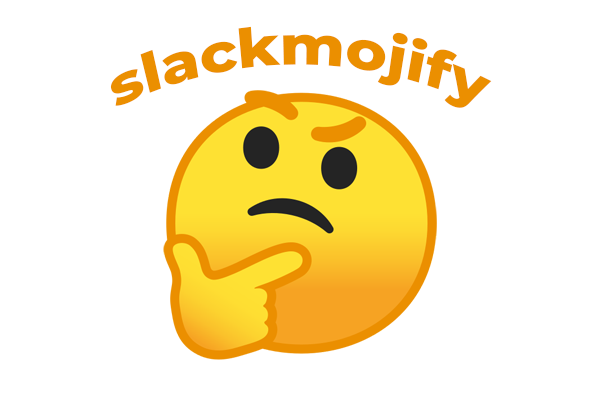
<style>
.page{position:relative;width:600px;height:400px;background:#ffffff}
.page>*{position:absolute;margin:0}
.t1{font:56.4px "Montserrat-ExtraBold";color:#eb8f00}
</style>
<div class="page">
<p class="t1" style="left:110px;top:26px;width:382px;height:82px">slackmojify</p>
</div>
